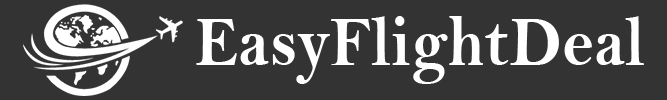
<style>
.page{position:relative;width:667px;height:100px;background:#333333}
.page>*{position:absolute;margin:0}
.t1{font:72.6px "BellMTBold";color:#ffffff;scale:0.91 1}
</style>
<div class="page">
<p class="t1" style="left:196px;top:16px;width:448px;height:68px">EasyFlightDeal</p>
</div>
